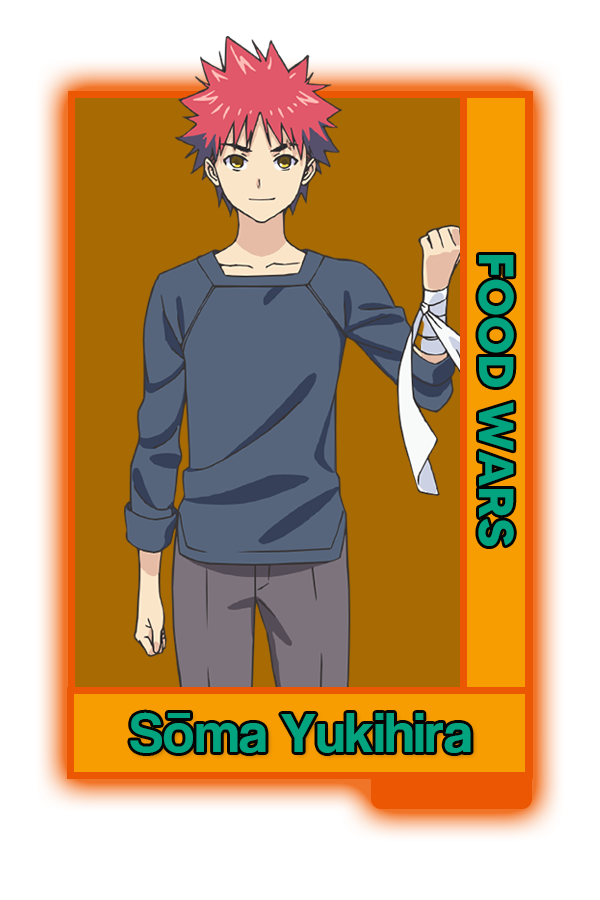
<style>
.page{position:relative;width:600px;height:900px;background:#ffffff}
.page>*{position:absolute;margin:0}
.t1{font:48.8px "MADETOMMY-Bold";color:#009f7b}
.t2{font:58.3px "CoolveticaRg-Regular";color:#009f7b}
</style>
<div class="page">
<p class="t1" style="left:478px;top:255px;width:36px;height:291px;rotate:90deg">FOOD WARS</p>
<p class="t2" style="left:130px;top:712px;width:341px;height:41px">Sōma Yukihira</p>
</div>
